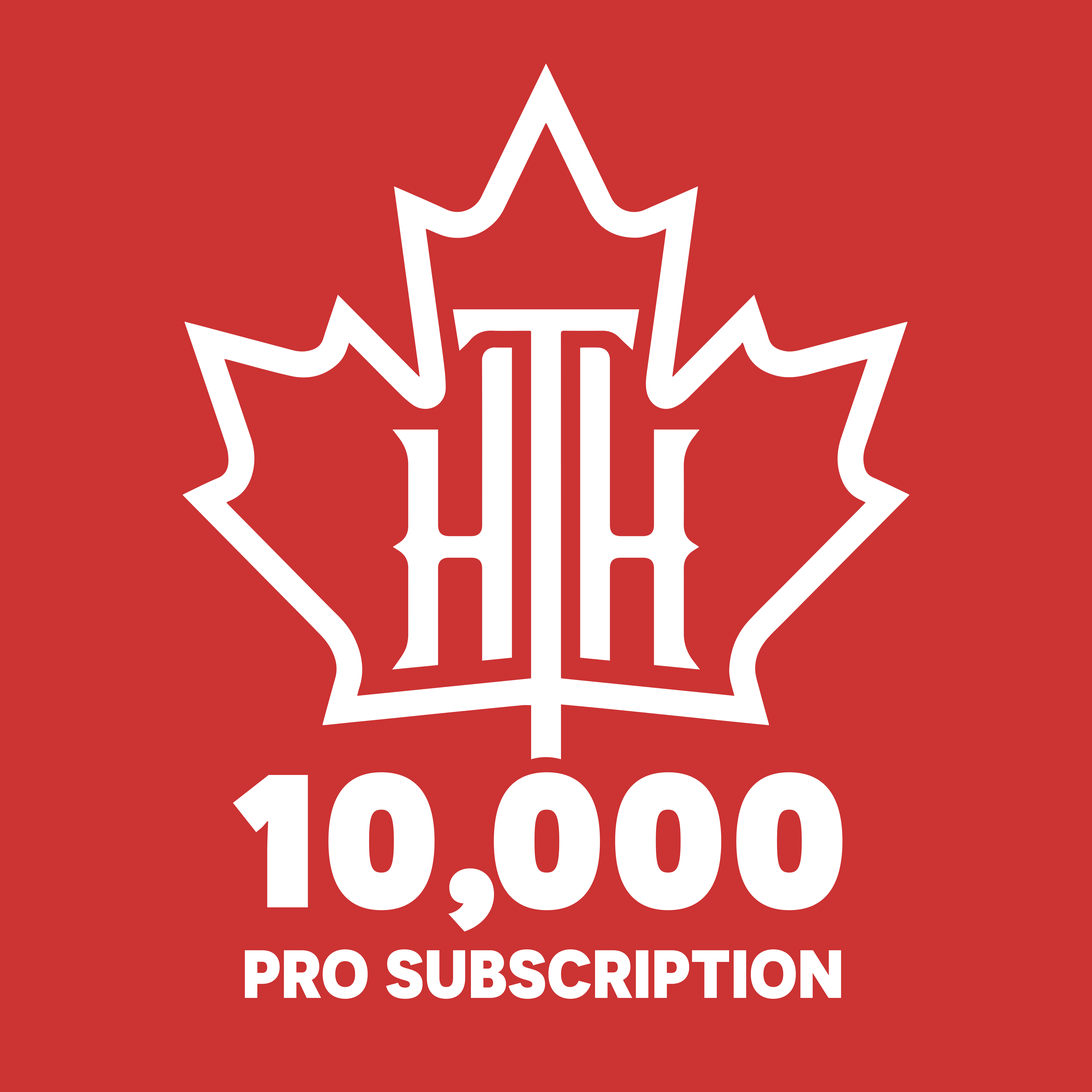
<style>
.page{position:relative;width:1092px;height:1092px;background:#cc3333}
.page>*{position:absolute;margin:0}
.t1{font:236.4px "Novecentosans-UltraBold";color:#ffffff}
.t2{font:236.4px "Novecentosans-UltraBold";letter-spacing:-0.06em;color:#ffffff}
.t3{font:68px "Novecentosans-UltraBold";color:#ffffff;text-transform:uppercase}
</style>
<div class="page">
<p class="t1" style="left:233px;top:772px;width:609px;height:160px">10<span class="t2">,</span>000</p>
<p class="t3" style="left:245px;top:949px;width:596px;height:50px">PRO SUBSCRIPTION</p>
</div>
